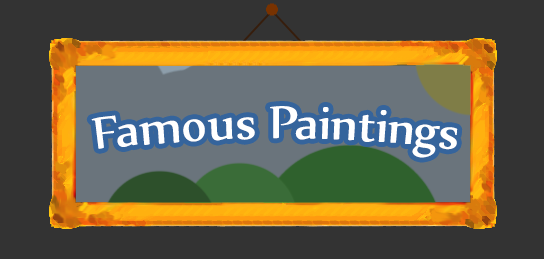
<style>
.page{position:relative;width:544px;height:259px;background:#333333}
.page>*{position:absolute;margin:0}
.t1{font:55px "Nyala-Regular";color:#ffffff}
</style>
<div class="page">
<p class="t1" style="left:91px;top:106px;width:367px;height:52px">Famous Paintings</p>
</div>
